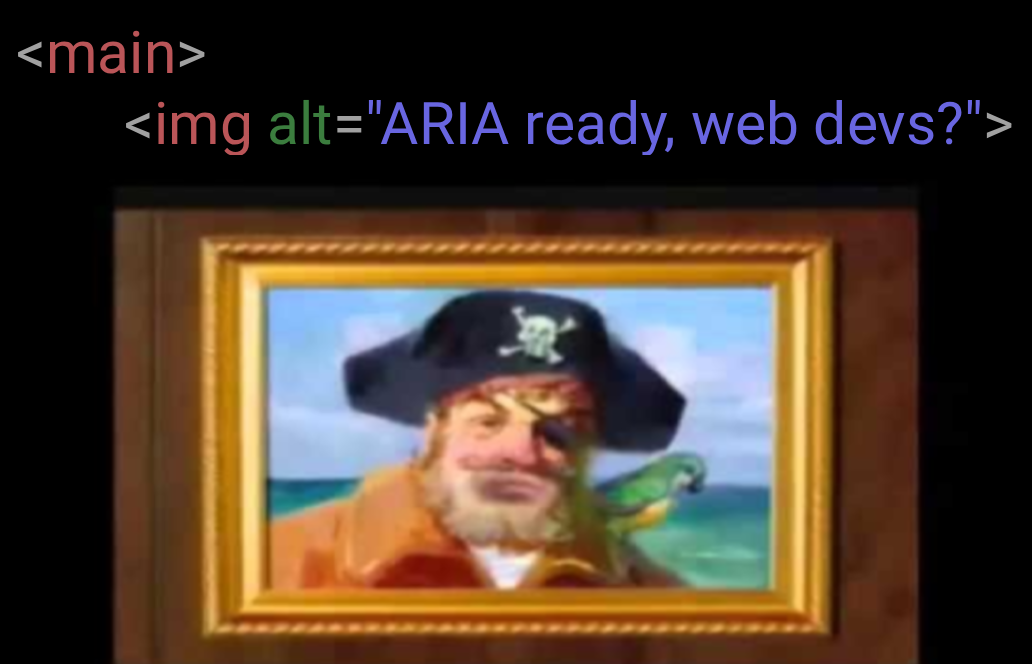
<style>
.page{position:relative;width:1032px;height:664px;background:#000000}
.page>*{position:absolute;margin:0}
.t1{font:58.7px "Roboto-Regular";color:#6966e1}
.t2{font:58.7px "Roboto-Regular";color:#a1a1a1}
.t3{font:58.7px "Roboto-Regular";color:#ba5558}
.t4{font:58.7px "Roboto-Regular";color:#3b7d3e}
</style>
<div class="page">
<p class="t1" style="left:18px;top:30px;width:994px;height:127px"><span class="t2">&lt;</span><span class="t3">main</span><span class="t2">&gt;<br>   </span><span class="t2">&lt;</span><span class="t3">img </span><span class="t4">alt</span><span class="t2">=</span>"ARIA ready, web devs?"<span class="t2">&gt;</span></p>
</div>
